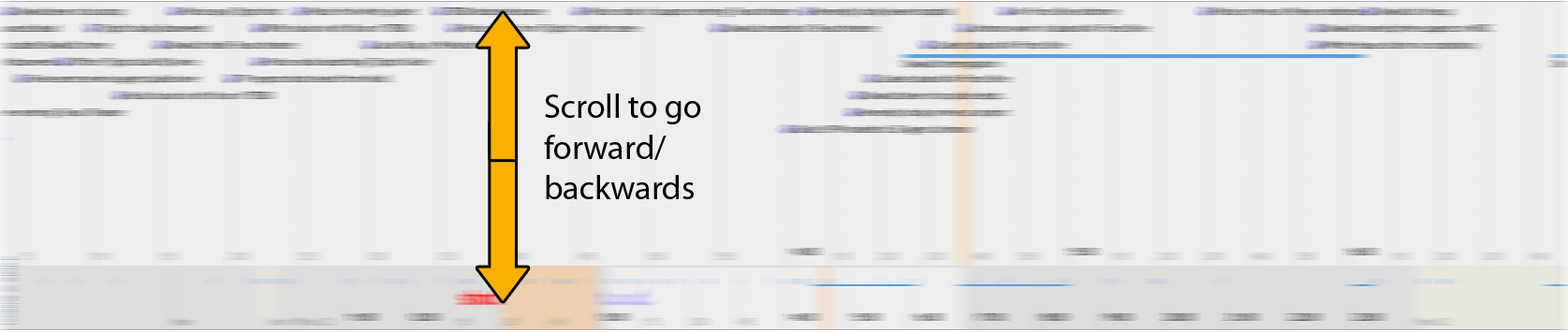
<style>
.page{position:relative;width:1568px;height:332px;background:#eeeeee}
.page>*{position:absolute;margin:0}
.t1{font:33.7px "MyriadPro-Regular";color:#000000}
</style>
<div class="page">
<p class="t1" style="left:544px;top:94px;width:157px;height:105px">Scroll to go<br>forward/<br>backwards</p>
</div>
